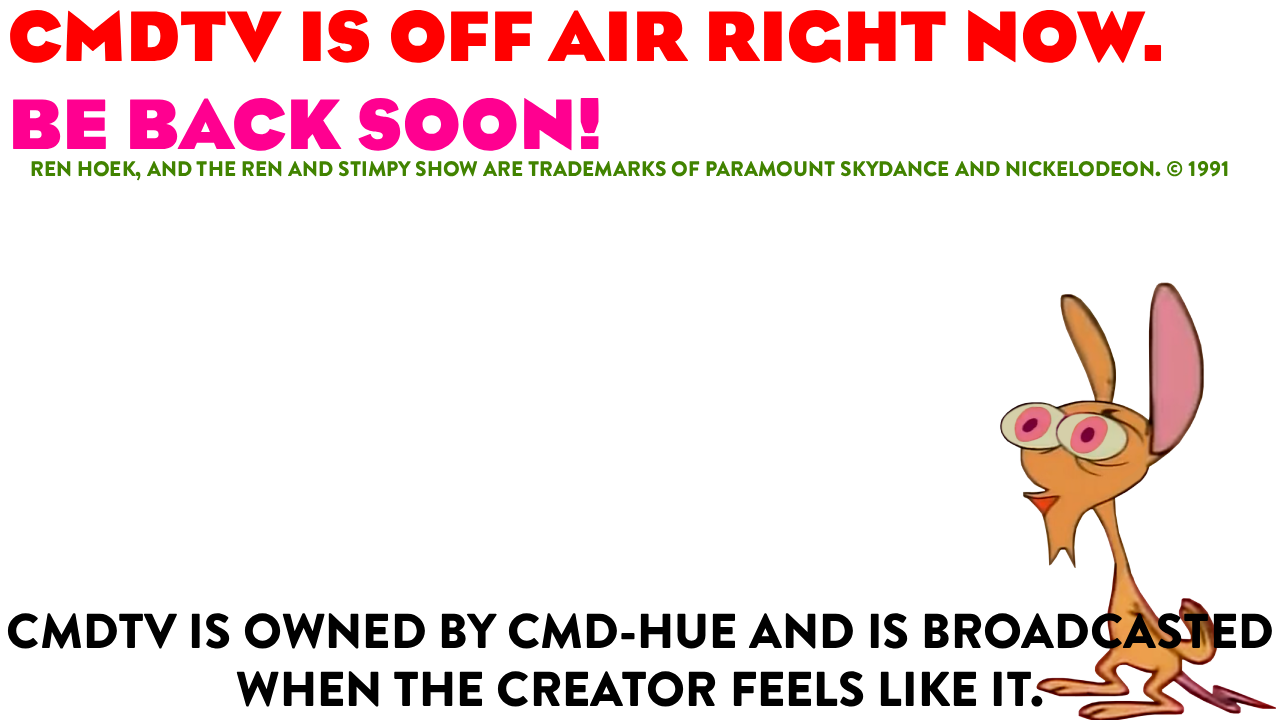
<style>
.page{position:relative;width:1280px;height:720px;background:#ffffff}
.page>*{position:absolute;margin:0}
.t1{font:73px "Eagle-Bold";color:#ff0000}
.t2{font:73px "Eagle-Bold";color:#ff0090}
.t3{font:21px "BrandonText-Black";color:#418300}
.t4{font:49px "BrandonText-Black";color:#000000}
</style>
<div class="page">
<p class="t1" style="left:10px;top:9px;width:1152px;height:142px">CMDTV IS OFF AIR RIGHT NOW.<br><span class="t2">BE BACK SOON!</span></p>
<p class="t3" style="left:31px;top:161px;width:1197px;height:20px">REN HOEK, AND THE REN AND STIMPY SHOW ARE TRADEMARKS OF PARAMOUNT SKYDANCE AND NICKELODEON. © 1991</p>
<p class="t4" style="left:7px;top:613px;width:1265px;height:94px;text-align:center">CMDTV IS OWNED BY CMD-HUE AND IS BROADCASTED WHEN THE CREATOR FEELS LIKE IT.</p>
</div>
